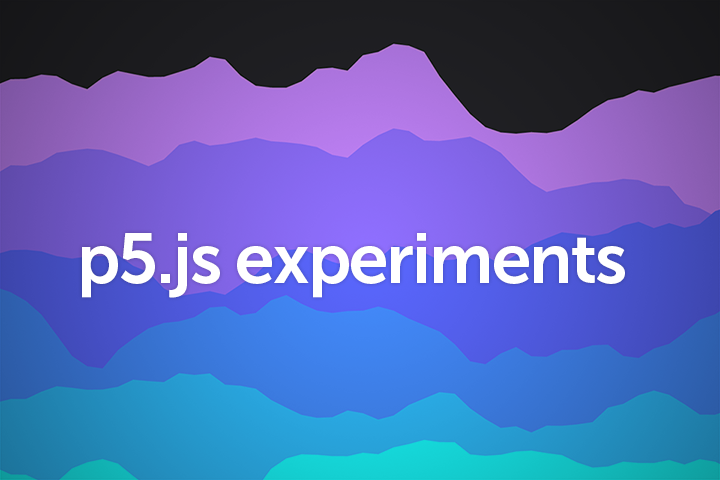
<style>
.page{position:relative;width:720px;height:480px}
.page>*{position:absolute;margin:0}
.t1{font:70.5px "MuseoSans-700";letter-spacing:-0.025em;color:#ffffff}
</style>
<div class="page">
<p class="t1" style="left:82px;top:233px;width:543px;height:65px">p5.js experiments</p>
</div>
